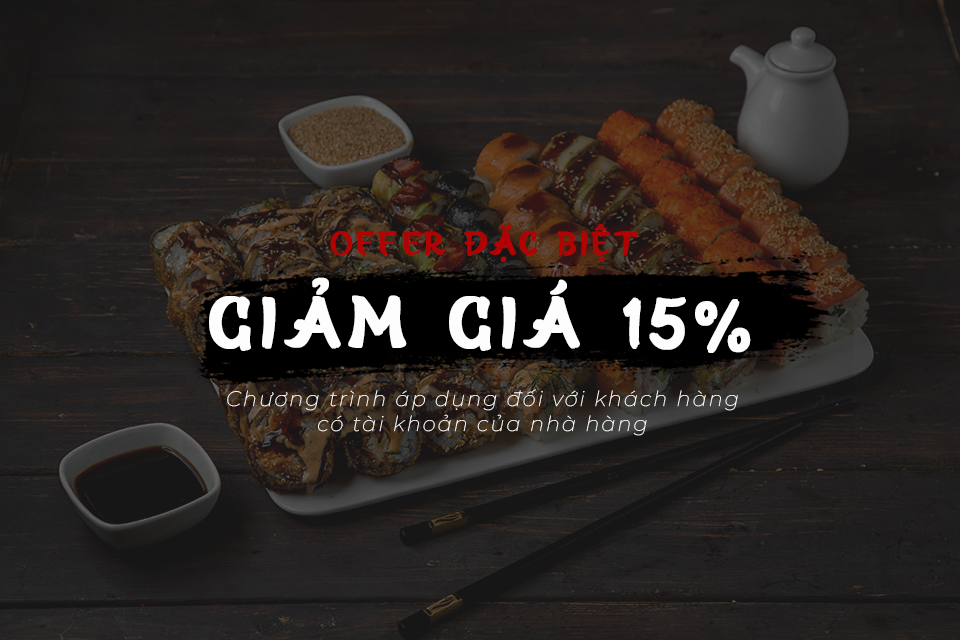
<style>
.page{position:relative;width:960px;height:640px}
.page>*{position:absolute;margin:0}
.t1{font:34.1px "SVN-HiroMisake-Regular";letter-spacing:0.1em;color:#b10304;font-weight:bold}
.t2{font:73.9px "SVN-HiroMisake-Regular";letter-spacing:0.1em;color:#fdfdfd;font-weight:bold}
.t3{font:20.9px "Montserrat-ThinItalic";letter-spacing:0.1em;color:#ffffff;font-weight:bold}
</style>
<div class="page">
<p class="t1" style="left:330px;top:224px;width:308px;height:38px">Offer đặc biệt</p>
<p class="t2" style="left:209px;top:277px;width:542px;height:76px">Giảm giá 15%</p>
<p class="t3" style="left:227px;top:389px;width:511px;height:47px;text-align:center">Chương trình áp dụng đối với khách hàng<br>có tài khoản của nhà hàng</p>
</div>
